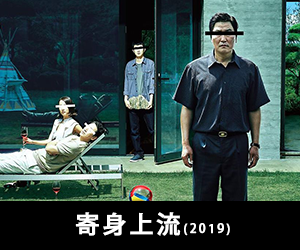
<style>
.page{position:relative;width:300px;height:250px}
.page>*{position:absolute;margin:0}
.t1{font:12px "KozGoPro-Medium";letter-spacing:0.18em;color:#ffffff;font-weight:bold}
.t2{font:24px "KozGoPr6N-Medium";letter-spacing:0.1em;color:#ffffff;font-weight:bold}
</style>
<div class="page">
<p class="t1" style="left:75px;top:212px;width:155px;height:24px"><span class="t2">寄身上流</span>(2019)</p>
</div>
